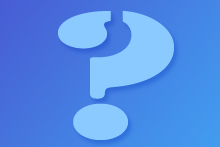
<style>
.page{position:relative;width:220px;height:147px;background:#8bcaff}
.page>*{position:absolute;margin:0}
.t1{font:167.6px "StencilStd";color:#8bcaff;scale:1.51 1}
</style>
<div class="page">
<p class="t1" style="left:58px;top:11px;width:116px;height:129px">?</p>
</div>
